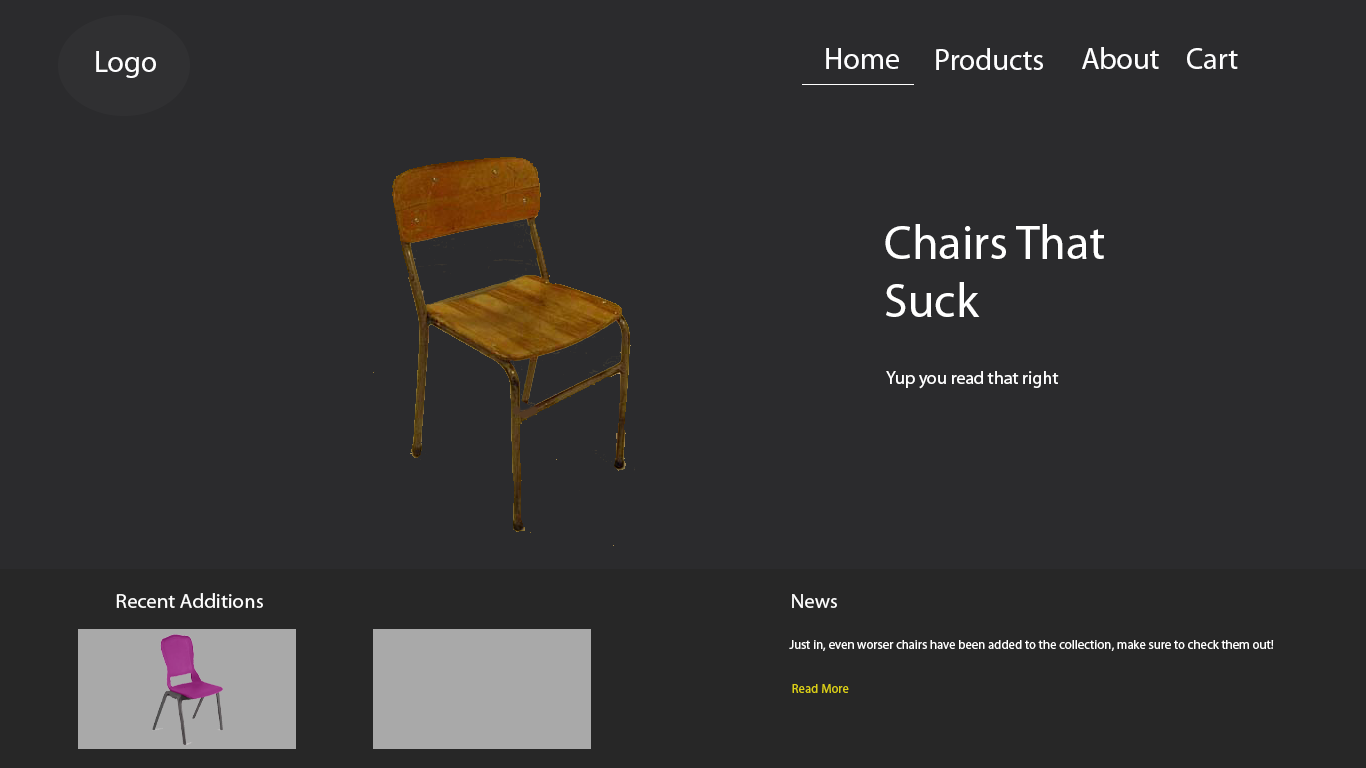
<style>
.page{position:relative;width:1366px;height:768px;background:#2b2b2d}
.page>*{position:absolute;margin:0}
.t1{font:30px "MyriadPro-Regular";color:#fefeff}
.t2{font:48px "MyriadPro-Regular";color:#ffffff}
.t3{font:18px "MyriadPro-Regular";color:#ffffff}
.t4{font:20.9px "MyriadPro-Regular";color:#ffffff}
.t5{font:12.8px "MyriadPro-Regular";color:#ffffff}
.t6{font:12.8px "MyriadPro-Regular";color:#dcd015}
</style>
<div class="page">
<p class="t1" style="left:96px;top:51px;width:60px;height:27px">Logo</p>
<p class="t1" style="left:826px;top:48px;width:73px;height:21px">Home</p>
<p class="t1" style="left:936px;top:48px;width:107px;height:22px">Products</p>
<p class="t1" style="left:1082px;top:47px;width:77px;height:22px">About</p>
<p class="t1" style="left:1187px;top:48px;width:51px;height:21px">Cart</p>
<p class="t2" style="left:885px;top:224px;width:219px;height:93px">Chairs That <br>Suck</p>
<p class="t3" style="left:886px;top:371px;width:173px;height:18px">Yup you read that right</p>
<p class="t4" style="left:116px;top:593px;width:147px;height:15px">Recent Additions</p>
<p class="t4" style="left:792px;top:594px;width:45px;height:14px">News</p>
<p class="t5" style="left:789px;top:640px;width:485px;height:11px">Just in, even worser chairs have been added to the collection, make sure to check them out!</p>
<p class="t6" style="left:792px;top:684px;width:57px;height:9px">Read More</p>
</div>
